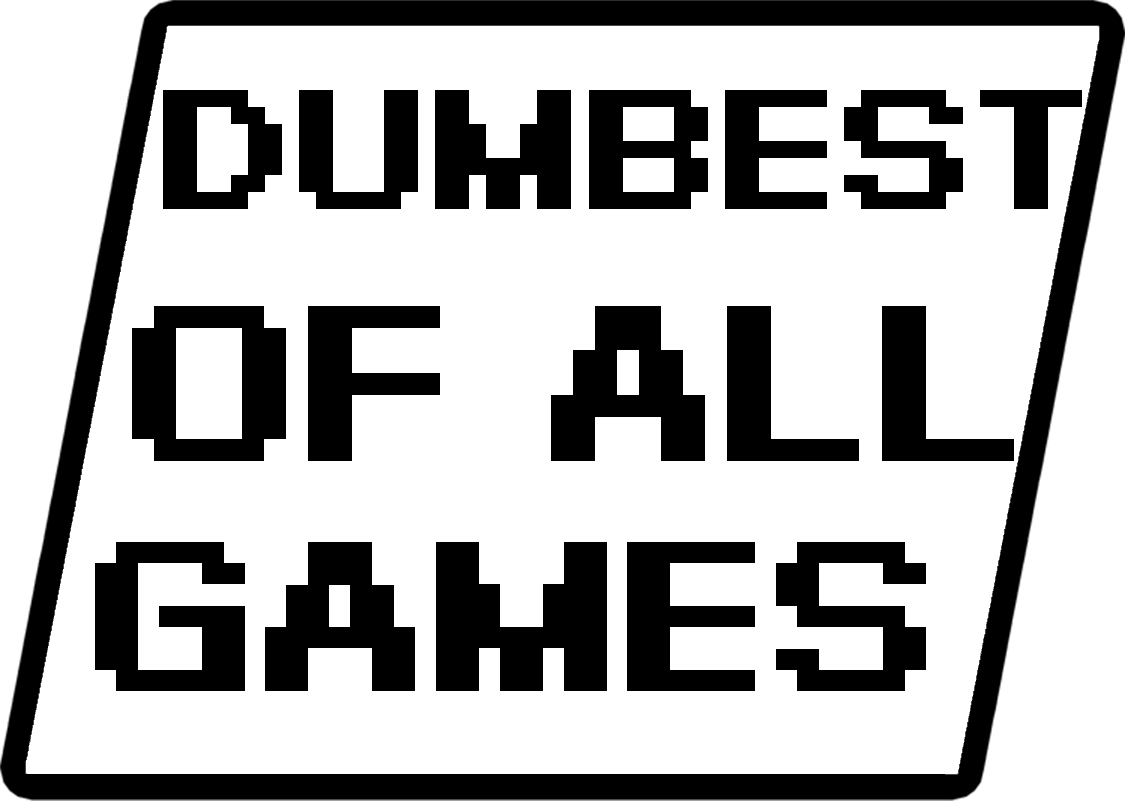
<style>
.page{position:relative;width:1125px;height:801px;background:#ffffff}
.page>*{position:absolute;margin:0}
.t1{font:158.9px "YamahaEBMSevenBold";color:#000000}
.t2{font:205.8px "YamahaEBMSevenBold";color:#000000}
.t3{font:198.6px "YamahaEBMSevenBold";color:#000000}
</style>
<div class="page">
<p class="t1" style="left:163px;top:90px;width:919px;height:119px">DUMBEST</p>
<p class="t2" style="left:132px;top:306px;width:882px;height:155px">OF ALL</p>
<p class="t3" style="left:95px;top:542px;width:831px;height:149px">GAMES</p>
</div>
